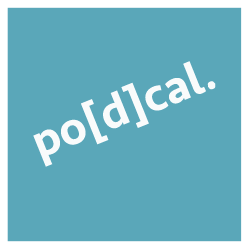
<style>
.page{position:relative;width:250px;height:250px;background:#5aa7b9}
.page>*{position:absolute;margin:0}
.t1{font:48px "Seravek-Medium";color:#f9fbfc}
</style>
<div class="page">
<p class="t1" style="left:33px;top:61px;width:183px;height:106px;rotate:-22deg">po[d]cal.</p>
</div>
